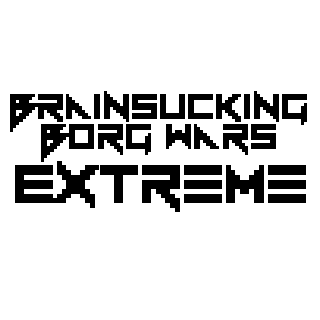
<style>
.page{position:relative;width:320px;height:320px;background:#ffffff}
.page>*{position:absolute;margin:0}
.t1{font:50px "Vermin-Vibes-1989";color:#000000}
.t2{font:75px "Vermin-Vibes-1989";color:#000000}
</style>
<div class="page">
<p class="t1" style="left:10px;top:91px;width:297px;height:41px">BrainSucking</p>
<p class="t1" style="left:41px;top:124px;width:235px;height:38px">Borg Wars</p>
<p class="t2" style="left:15px;top:161px;width:291px;height:51px">Extreme</p>
</div>
